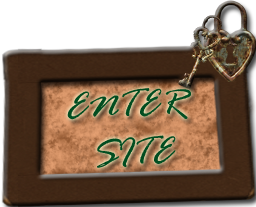
<style>
.page{position:relative;width:256px;height:207px}
.page>*{position:absolute;margin:0}
.t1{font:40px "RageItalic";color:#045426}
</style>
<div class="page">
<p class="t1" style="left:67px;top:88px;width:124px;height:80px;text-align:center;rotate:-2deg">ENTER <br>SITE</p>
</div>
